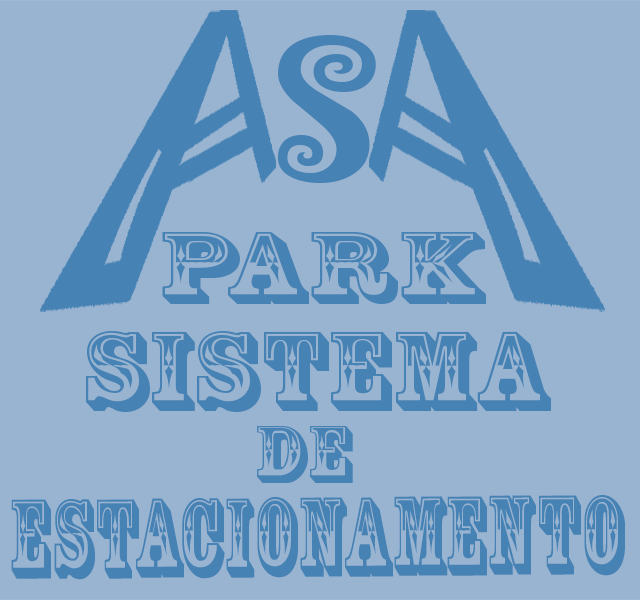
<style>
.page{position:relative;width:640px;height:600px;background:#99b4d1}
.page>*{position:absolute;margin:0}
.t1{font:166.1px "Jokerman-Regular";letter-spacing:0.02em;color:#4682b4;scale:1.14 1}
.t2{font:95.4px "RosewoodStd-Regular";letter-spacing:0.02em;color:#4682b4;scale:1.39 1}
.t3{font:105.1px "RosewoodStd-Regular";letter-spacing:0.02em;color:#4682b4;scale:1.14 1}
.t4{font:75.3px "RosewoodStd-Regular";letter-spacing:0.02em;color:#4682b4;scale:1.12 1}
.t5{font:105.1px "RosewoodStd-Regular";letter-spacing:0.02em;color:#4682b4;scale:0.74 1}
</style>
<div class="page">
<p class="t1" style="left:277px;top:35px;width:99px;height:148px">S</p>
<p class="t2" style="left:162px;top:232px;width:324px;height:72px">PARK</p>
<p class="t3" style="left:86px;top:331px;width:465px;height:81px">SISTEMA</p>
<p class="t4" style="left:257px;top:426px;width:96px;height:57px">DE</p>
<p class="t5" style="left:11px;top:495px;width:614px;height:85px">ESTACIONAMENTO</p>
</div>
